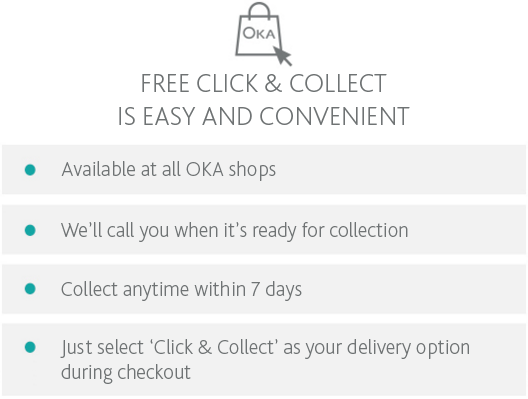
<style>
.page{position:relative;width:528px;height:399px;background:#f2f2f2}
.page>*{position:absolute;margin:0}
.t1{font:26.8px "BlissPro-ExtraLight";color:#6f7374}
.t2{font:21.1px "BlissPro-ExtraLight";color:#6f7374}
</style>
<div class="page">
<p class="t1" style="left:119px;top:74px;width:291px;height:51px;text-align:center">FREE CLICK &amp; COLLECT<br>IS EASY AND CONVENIENT</p>
<p class="t2" style="left:61px;top:161px;width:215px;height:20px">Available at all OKA shops</p>
<p class="t2" style="left:61px;top:222px;width:347px;height:20px">We’ll call you when it’s ready for collection</p>
<p class="t2" style="left:61px;top:281px;width:241px;height:20px">Collect anytime within 7 days</p>
<p class="t2" style="left:60px;top:339px;width:409px;height:45px">Just select ‘Click &amp; Collect’ as your delivery option<br>during checkout</p>
</div>
